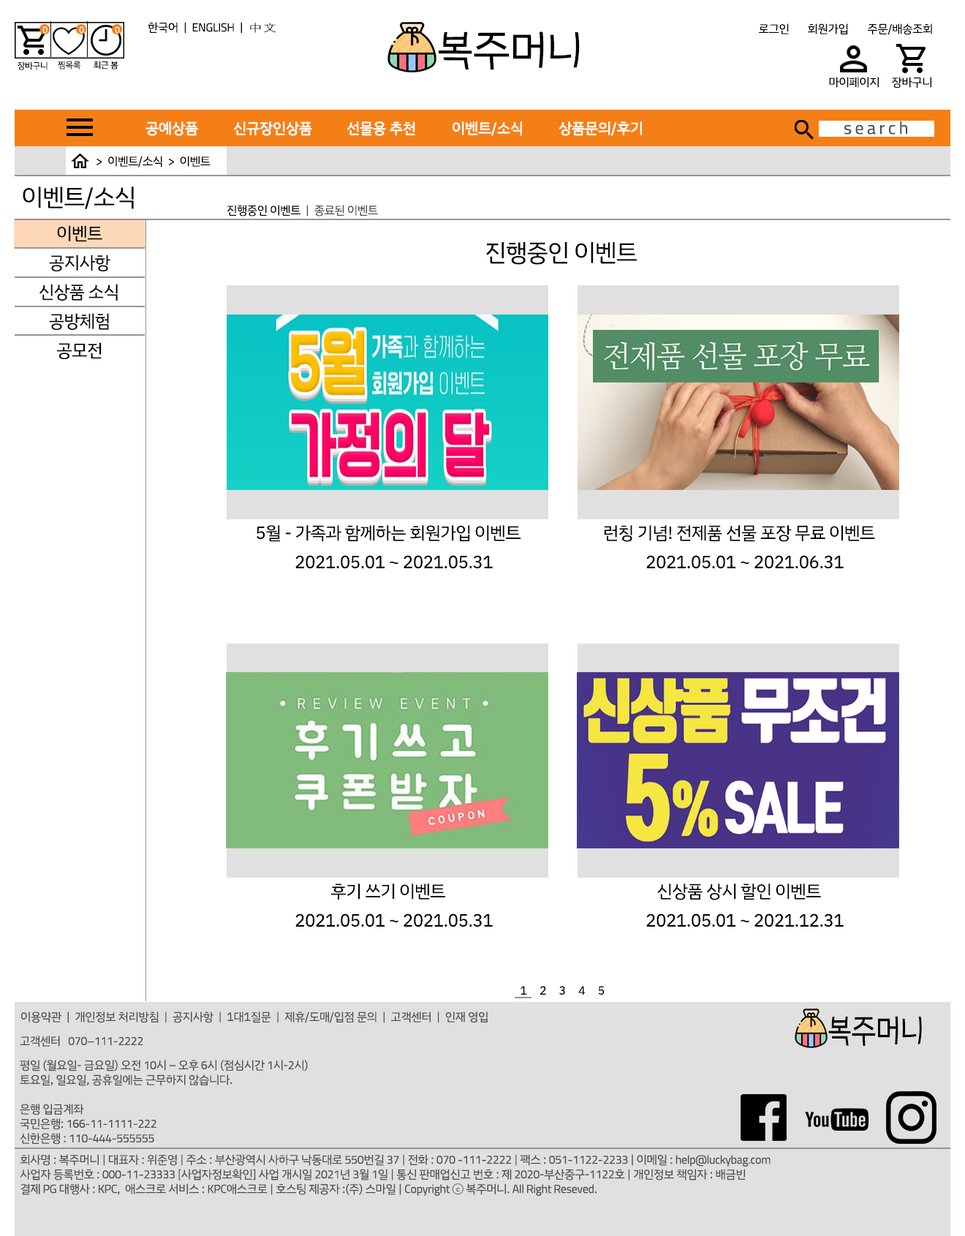
<style>
.page{position:relative;width:965px;height:1236px;background:#ffffff}
.page>*{position:absolute;margin:0}
.t1{font:8.8px "IBMPlexSansKR";letter-spacing:-0.02em;color:#ffffff}
.t2{font:11.7px "TitilliumWeb-Regular";letter-spacing:-0.02em;color:#000000}
.t3{font:11.7px "IBMPlexSansKR";letter-spacing:-0.02em;color:#000000}
.t4{font:11.7px "Terminal";letter-spacing:-0.02em;color:#000000}
.t5{font:31.4px "IBMPlexSansKR";letter-spacing:-0.02em;color:#000000}
.t6{font:34.4px "IBMPlexSansKR";letter-spacing:-0.02em;color:#000000}
.t7{font:8.8px "IBMPlexSansKR";letter-spacing:-0.02em;color:#000000}
.t8{font:14.6px "IBMPlexSansKR";letter-spacing:-0.02em;color:#ffffff;font-weight:bold}
.t9{font:17.5px "TitilliumWeb-Regular";letter-spacing:-0.02em;color:#4d4d4d}
.t10{font:11.7px "IBMPlexSansKR";letter-spacing:-0.02em;color:#010101}
.t11{font:24.1px "IBMPlexSansKR";letter-spacing:-0.02em;color:#000000}
.t12{font:11.7px "IBMPlexSansKR";letter-spacing:-0.02em;color:#4d4d4d}
.t13{font:17.5px "IBMPlexSansKR";letter-spacing:-0.02em;color:#000000}
.t14{font:24.4px "IBMPlexSansKR";letter-spacing:-0.02em;color:#000000;scale:0.85 1}
.t15{font:26.7px "IBMPlexSansKR";letter-spacing:-0.02em;color:#000000;scale:0.85 1}
.t16{font:11.7px "TitilliumWeb-Regular";letter-spacing:-0.02em;color:#4d4d4d}
.t17{font:11.7px/14.6px "IBMPlexSansKR";letter-spacing:-0.02em;color:#4d4d4d}
.t18{font:11.7px/14.6px "TitilliumWeb-Regular";letter-spacing:-0.02em;color:#4d4d4d}
</style>
<div class="page">
<p class="t1" style="left:42px;top:26px;width:6px;height:8px">0</p>
<p class="t1" style="left:79px;top:26px;width:5px;height:8px">0</p>
<p class="t1" style="left:115px;top:26px;width:5px;height:8px">0</p>
<p class="t2" style="left:148px;top:22px;width:128px;height:12px"><span class="t3">한국어  |  </span>ENGLISH<span class="t3">  |  </span><span class="t4">中文</span></p>
<p class="t3" style="left:759px;top:23px;width:30px;height:11px">로그인</p>
<p class="t3" style="left:808px;top:23px;width:40px;height:11px">회원가입</p>
<p class="t3" style="left:868px;top:23px;width:64px;height:12px">주문/배송조회</p>
<p class="t5" style="left:439px;top:31px;width:141px;height:39px"><span class="t6">            <br>            <br>             </span>복주머니</p>
<p class="t7" style="left:18px;top:61px;width:30px;height:9px">장바구니</p>
<p class="t7" style="left:58px;top:61px;width:23px;height:8px">찜목록</p>
<p class="t7" style="left:94px;top:61px;width:24px;height:8px">최근 봄</p>
<p class="t3" style="left:829px;top:77px;width:50px;height:11px">마이페이지</p>
<p class="t3" style="left:892px;top:77px;width:39px;height:11px">장바구니</p>
<p class="t8" style="left:145px;top:121px;width:53px;height:15px">공예상품</p>
<p class="t8" style="left:234px;top:121px;width:78px;height:15px">신규장인상품</p>
<p class="t8" style="left:347px;top:121px;width:68px;height:15px">선물용 추천</p>
<p class="t8" style="left:453px;top:121px;width:69px;height:15px">이벤트/소식</p>
<p class="t8" style="left:559px;top:121px;width:83px;height:15px">상품문의/후기</p>
<p class="t9" style="left:844px;top:121px;width:63px;height:14px">s e a r c h</p>
<p class="t10" style="left:97px;top:156px;width:114px;height:11px">&gt;  이벤트/소식  &gt;  이벤트</p>
<p class="t11" style="left:23px;top:186px;width:111px;height:23px">이벤트/소식</p>
<p class="t12" style="left:227px;top:205px;width:151px;height:11px"><span class="t3">진행중인 이벤트  </span>|  종료된 이벤트</p>
<p class="t13" style="left:57px;top:225px;width:45px;height:17px">이벤트</p>
<p class="t11" style="left:486px;top:242px;width:151px;height:23px">진행중인 이벤트</p>
<p class="t13" style="left:49px;top:254px;width:61px;height:17px">공지사항</p>
<p class="t13" style="left:39px;top:284px;width:79px;height:16px">신상품 소식</p>
<p class="t13" style="left:49px;top:313px;width:60px;height:17px">공방체험</p>
<p class="t13" style="left:57px;top:342px;width:45px;height:17px">공모전</p>
<p class="t13" style="left:257px;top:525px;width:264px;height:17px">5월 - 가족과 함께하는 회원가입 이벤트</p>
<p class="t13" style="left:604px;top:525px;width:271px;height:17px">런칭 기념! 전제품 선물 포장 무료 이벤트</p>
<p class="t13" style="left:295px;top:555px;width:198px;height:14px">2021.05.01 ~ 2021.05.31</p>
<p class="t13" style="left:646px;top:555px;width:198px;height:14px">2021.05.01 ~ 2021.06.31</p>
<p class="t13" style="left:331px;top:883px;width:114px;height:16px">후기 쓰기 이벤트</p>
<p class="t13" style="left:657px;top:883px;width:164px;height:17px">신상품 상시 할인 이벤트</p>
<p class="t13" style="left:295px;top:913px;width:198px;height:14px">2021.05.01 ~ 2021.05.31</p>
<p class="t13" style="left:646px;top:913px;width:198px;height:14px">2021.05.01 ~ 2021.12.31</p>
<p class="t3" style="left:521px;top:986px;width:84px;height:9px">1     2     3     4     5</p>
<p class="t12" style="left:21px;top:1011px;width:467px;height:12px">이용약관  |  개인정보 처리방침  |  공지사항  |  1대1질문  |  제휴/도매/입점 문의  |  고객센터  |  인재 영입</p>
<p class="t14" style="left:828px;top:1016px;width:94px;height:29px"><span class="t15">            <br>            <br>             </span>복주머니</p>
<p class="t16" style="left:20px;top:1035px;width:123px;height:12px"><span class="t12">고객센터   </span>070–111-2222</p>
<p class="t17" style="left:20px;top:1059px;width:288px;height:85px">평일 (월요일- 금요일) 오전 <span class="t18">10</span>시 – 오후<span class="t18"> 6</span>시 (점심시간 <span class="t18">1</span>시-<span class="t18">2</span>시)<br>토요일, 일요일, 공휴일에는 근무하지 않습니다.<br><br>은행 입금계좌<br>국민은행: <span class="t18">166-11-1111-222<br></span>신한은행 : <span class="t18">110-444-555555</span></p>
<p class="t17" style="left:20px;top:1154px;width:751px;height:41px">회사명 : 복주머니 | 대표자 : 위준영 | 주소 : 부산광역시 사하구 낙동대로 <span class="t18">550</span>번길 <span class="t18">37</span> | 전화 : <span class="t18">070 -111-2222</span> | 팩스 : <span class="t18">051-1122-2233</span> | 이메일 : <span class="t18">help@luckybag.com<br></span>사업자 등록번호 : <span class="t18">000-11-23333</span> [사업자정보확인] 사업 개시일 <span class="t18">2021</span>년 <span class="t18">3</span>월<span class="t18"> 1</span>일 | 통신 판매업신고 번호 : 제 <span class="t18">2020</span>-부산중구-<span class="t18">1122</span>호 | 개인정보 책임자 : 배금빈<br>결제<span class="t18"> PG</span> 대행사 : <span class="t18">KPC</span>,  애스크로 서비스 : <span class="t18">KPC</span>애스크로 | 호스팅 제공자 :(주) 스마일 | <span class="t18">Copyright </span>ⓒ 복주머니. <span class="t18">All Right Reseved</span>.</p>
</div>
